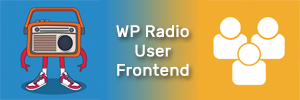
<style>
.page{position:relative;width:300px;height:100px;background:#f3ad2e}
.page>*{position:absolute;margin:0}
.t1{font:16.1px "Rubik-Regular";letter-spacing:0.01em;color:#fefffe;font-weight:bold}
</style>
<div class="page">
<p class="t1" style="left:116px;top:25px;width:73px;height:51px;text-align:center">WP Radio<br>User<br>Frontend</p>
</div>
